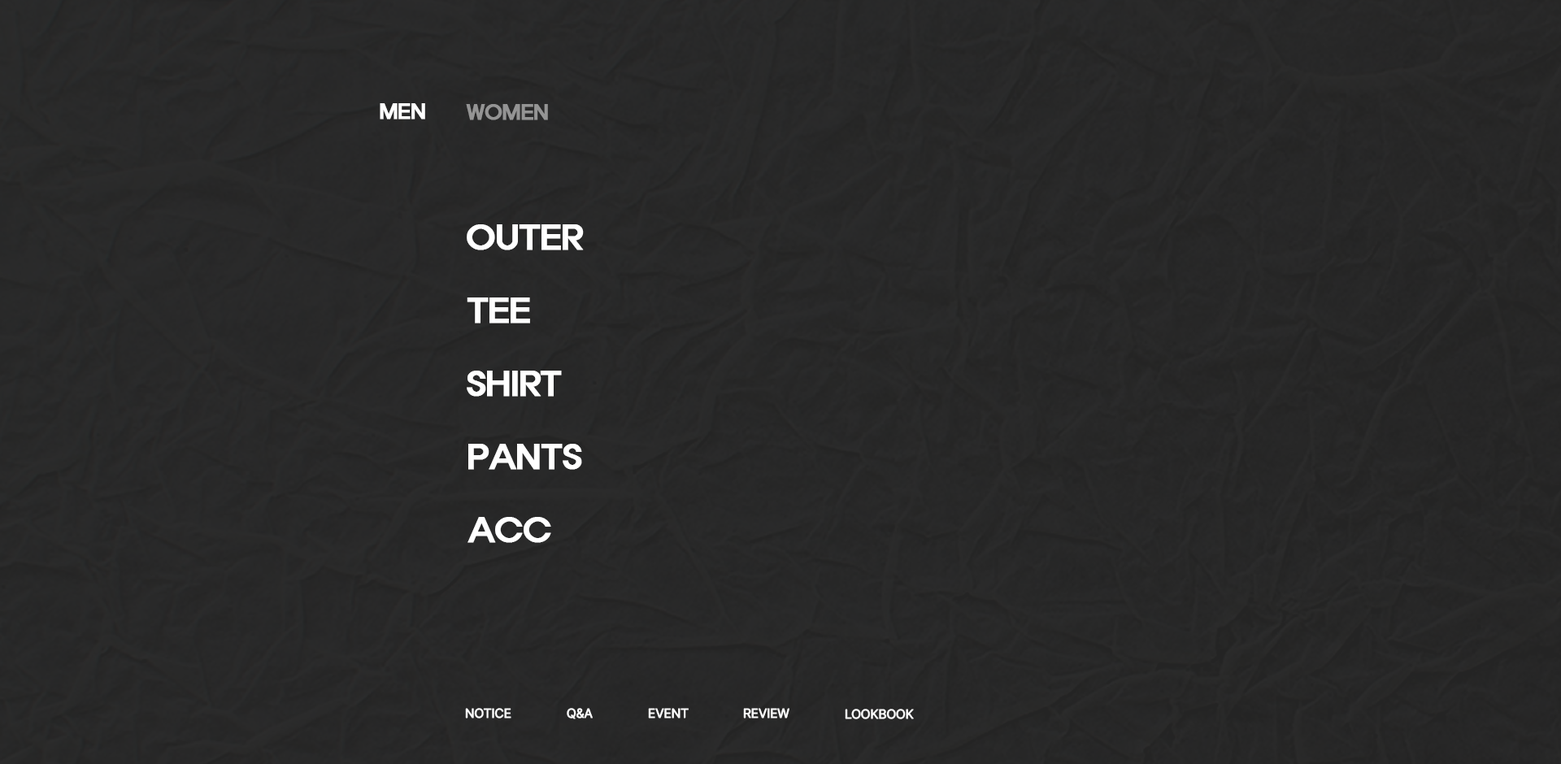
<style>
.page{position:relative;width:1561px;height:764px}
.page>*{position:absolute;margin:0}
.t1{font:19.5px "ExpoM-HM";letter-spacing:-0.025em;color:#ffffff;font-weight:bold}
.t2{font:19.5px "ExpoM-HM";letter-spacing:-0.025em;color:#949494;font-weight:bold}
.t3{font:32.5px "ExpoM-HM";letter-spacing:-0.025em;color:#ffffff;font-weight:bold}
.t4{font:13px "Pretendard-Regular";letter-spacing:-0.025em;color:#ffffff;font-weight:bold}
</style>
<div class="page">
<p class="t1" style="left:380px;top:103px;width:45px;height:16px">MEN</p>
<p class="t2" style="left:466px;top:104px;width:82px;height:16px">WOMEN</p>
<p class="t3" style="left:467px;top:224px;width:117px;height:26px">OUTER</p>
<p class="t3" style="left:467px;top:297px;width:63px;height:27px">TEE</p>
<p class="t3" style="left:467px;top:371px;width:95px;height:26px">SHIRT</p>
<p class="t3" style="left:468px;top:444px;width:114px;height:26px">PANTS</p>
<p class="t3" style="left:467px;top:517px;width:84px;height:26px">ACC</p>
<p class="t4" style="left:465px;top:708px;width:46px;height:11px">NOTICE</p>
<p class="t4" style="left:567px;top:708px;width:26px;height:11px">Q&amp;A</p>
<p class="t4" style="left:648px;top:708px;width:40px;height:11px">EVENT</p>
<p class="t4" style="left:743px;top:708px;width:46px;height:11px">REVIEW</p>
<p class="t4" style="left:845px;top:709px;width:69px;height:10px">LOOKBOOK</p>
</div>
